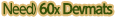
<style>
.page{position:relative;width:116px;height:18px;background:#ffffff}
.page>*{position:absolute;margin:0}
.t1{font:14px "UDShinGoPro-Bold";letter-spacing:-0.08em;color:#375309;scale:0.9 1}
.t2{font:14px "UDShinGoPro-DeBold";letter-spacing:-0.08em;color:#375309;scale:0.9 1}
.t3{font:12px "UDShinGoPro-DeBold";letter-spacing:-0.08em;color:#375309;scale:0.9 1}
.t4{font:12px "UDShinGoPro-Bold";letter-spacing:-0.08em;color:#375309;scale:0.9 1}
</style>
<div class="page">
<p class="t1" style="left:3px;top:2px;width:110px;height:13px"><span class="t2">Need</span><span class="t3">) </span>60<span class="t4">x</span> Devmats</p>
</div>
